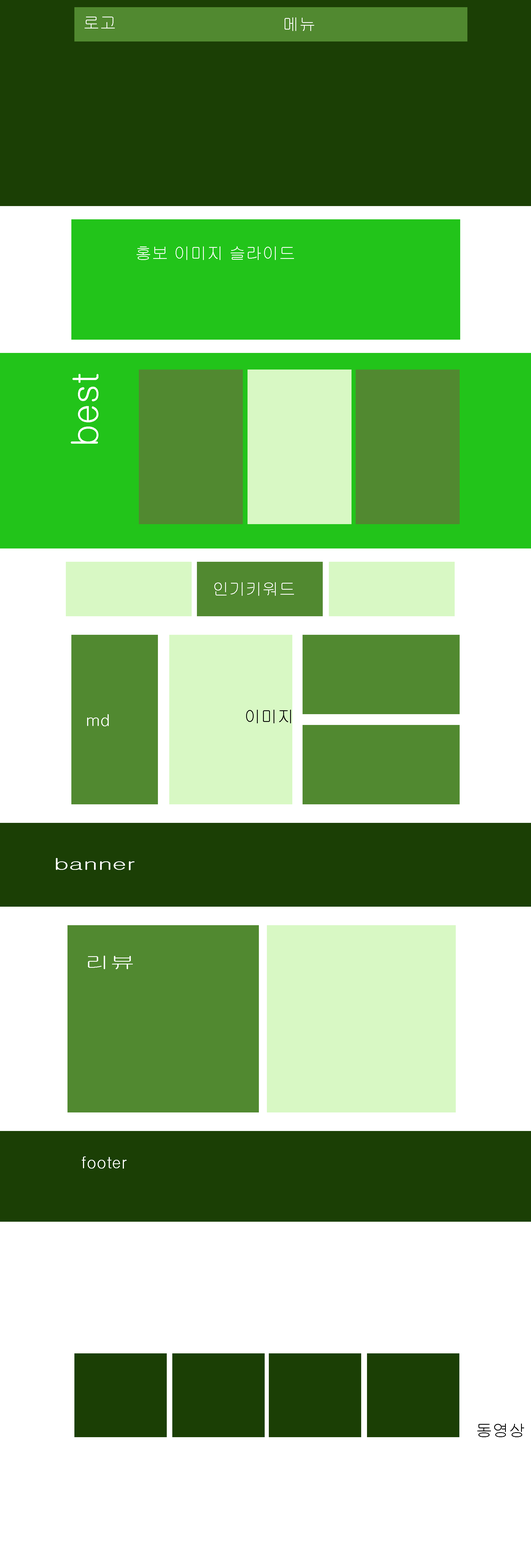
<style>
.page{position:relative;width:531px;height:1568px;background:#ffffff}
.page>*{position:absolute;margin:0}
.t1{font:16.6px "Gulim";color:#ffffff}
.t2{font:36.8px "Gulim";color:#ffffff}
.t3{font:16.6px "Gulim";color:#000000}
.t4{font:16.6px "Gulim";color:#ffffff;scale:1.52 1}
</style>
<div class="page">
<p class="t1" style="left:85px;top:17px;width:30px;height:11px">로고</p>
<p class="t1" style="left:285px;top:17px;width:29px;height:14px">메뉴</p>
<p class="t1" style="left:137px;top:246px;width:157px;height:14px">홍보 이미지 슬라이드</p>
<p class="t2" style="left:71px;top:374px;width:27px;height:70px;rotate:-90deg">best</p>
<p class="t1" style="left:214px;top:582px;width:80px;height:14px">인기키워드</p>
<p class="t3" style="left:246px;top:710px;width:45px;height:13px">이미지</p>
<p class="t1" style="left:87px;top:714px;width:22px;height:12px">md</p>
<p class="t4" style="left:56px;top:858px;width:78px;height:12px">banner</p>
<p class="t4" style="left:88px;top:956px;width:45px;height:13px">리뷰</p>
<p class="t1" style="left:82px;top:1156px;width:45px;height:13px">footer</p>
<p class="t3" style="left:477px;top:1424px;width:47px;height:13px">동영상</p>
</div>
